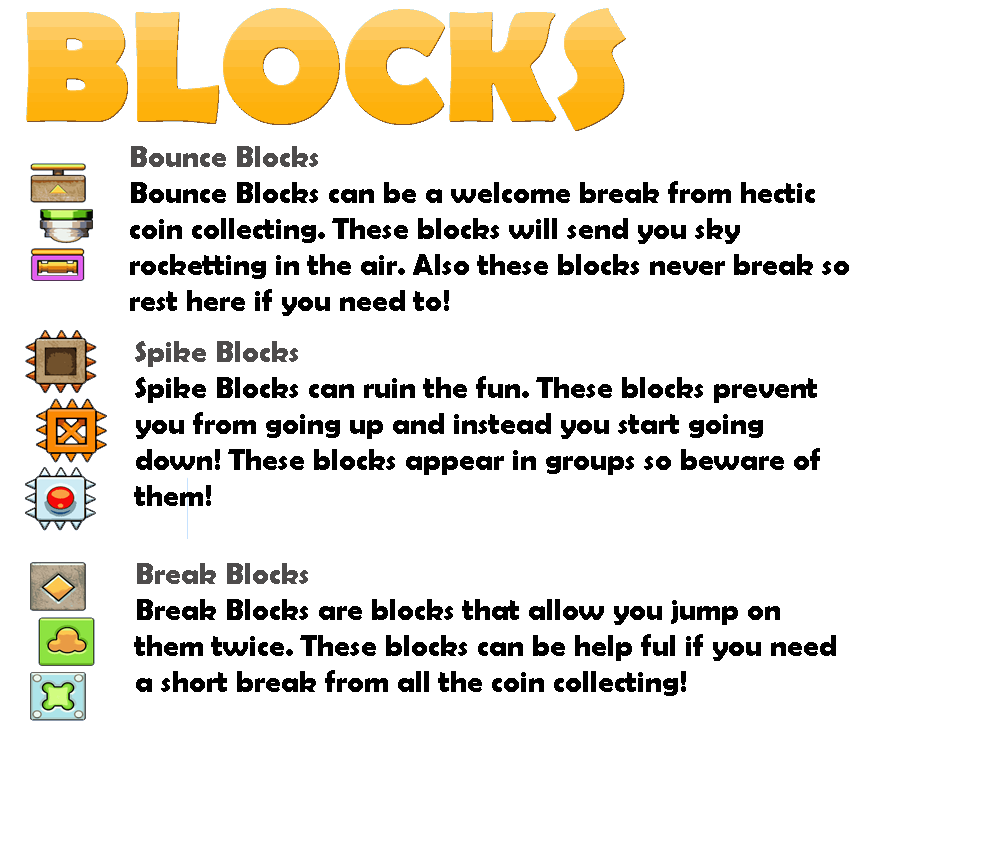
<style>
.page{position:relative;width:1000px;height:850px;background:#ffffff}
.page>*{position:absolute;margin:0}
.t1{font:30px "BerlinSansFBDemi-Bold";color:#000000}
.t2{font:30px "BerlinSansFBDemi-Bold";color:#4e4c4c}
.t3{font:30px "BerlinSansFBDemi-Bold";color:#010101}
</style>
<div class="page">
<p class="t1" style="left:130px;top:146px;width:719px;height:170px"><span class="t2">Bounce Blocks<br></span>Bounce Blocks can be a welcome break from hectic coin collecting. These blocks will send you sky rocketting in the air. Also these blocks never break so rest here if you need to!</p>
<p class="t3" style="left:134px;top:341px;width:686px;height:165px"><span class="t2">Spike Blocks<br></span>Spike Blocks can ruin the fun. These blocks prevent you from going up and instead you start going down! These blocks appear in groups so beware of them!</p>
<p class="t1" style="left:134px;top:563px;width:702px;height:133px"><span class="t2">Break Blocks<br></span>Break Blocks are blocks that allow you jump on them twice. These blocks can be help ful if you need a short break from all the coin collecting!</p>
</div>
